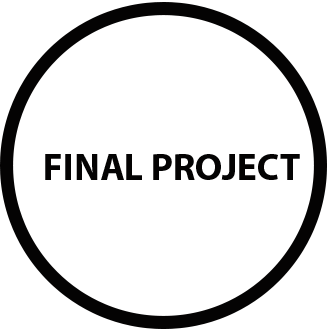
<style>
.page{position:relative;width:328px;height:334px;background:#ffffff}
.page>*{position:absolute;margin:0}
.t1{font:37.5px "MyriadPro-Bold";color:#040303}
</style>
<div class="page">
<p class="t1" style="left:45px;top:154px;width:255px;height:26px">FINAL PROJECT</p>
</div>
